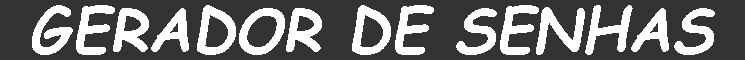
<style>
.page{position:relative;width:745px;height:60px;background:#333333}
.page>*{position:absolute;margin:0}
.t1{font:60px "ComicSansMS-BoldItalic";color:#ffffff}
</style>
<div class="page">
<p class="t1" style="left:32px;top:5px;width:683px;height:50px">GERADOR DE SENHAS</p>
</div>
